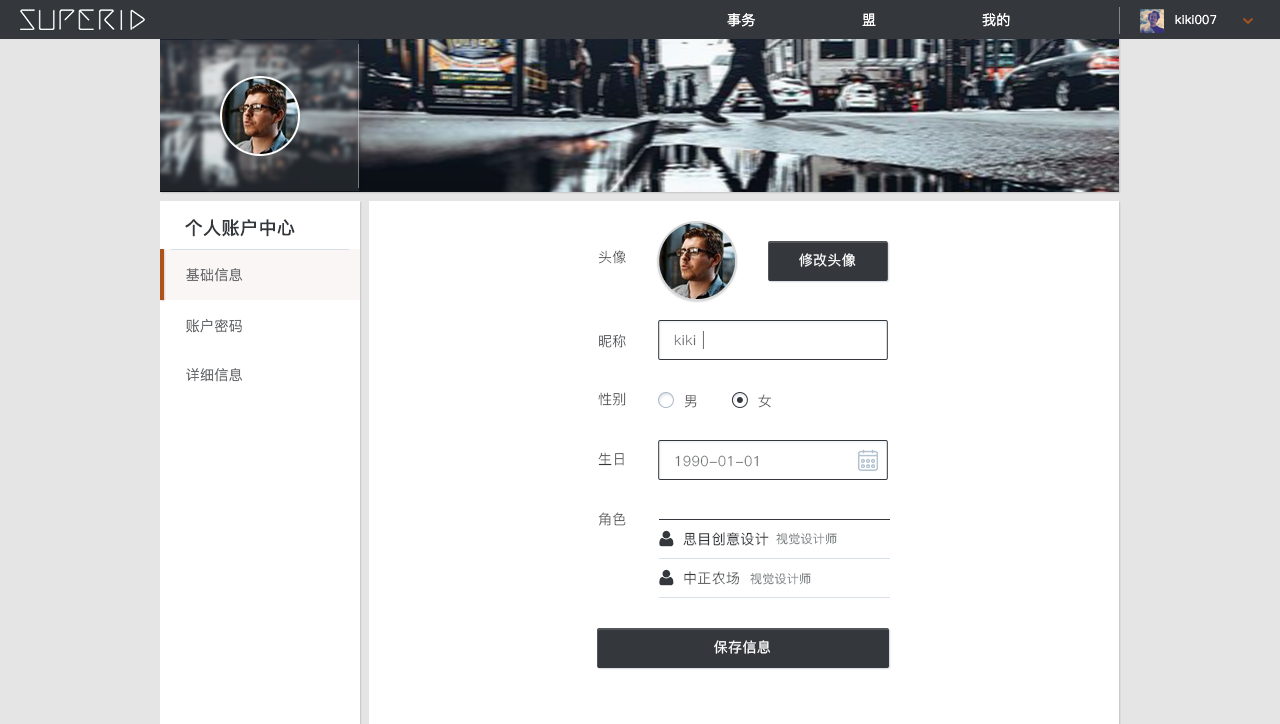
<style>
.page{position:relative;width:1280px;height:724px;background:#ffffff}
.page>*{position:absolute;margin:0}
.t1{font:14px "PingFang-SC-Regular";letter-spacing:0.025em;color:#ffffff}
.t2{font:12px "PingFang-SC-Regular";letter-spacing:0.025em;color:#ffffff}
.t3{font:18px "PingFang-SC-Bold";letter-spacing:0.025em;color:#34383c}
.t4{font:14px "PingFang-SC-Regular";letter-spacing:0.025em}
.t5{font:14px "PingFang-SC-Medium";letter-spacing:0.025em;color:#ffffff}
.t6{font:14px "PingFang-SC-Regular";letter-spacing:0.025em;color:#6a6c6f}
.t7{font:14px "PingFang-SC-Regular";letter-spacing:0.025em;color:#34383c}
.t8{font:14px "PingFang-SC-Medium";letter-spacing:0.025em;color:#34383c}
.t9{font:12px "PingFang-SC-Regular";letter-spacing:0.025em;color:#74797d}
</style>
<div class="page">
<p class="t1" style="left:727px;top:13px;width:28px;height:14px">事务</p>
<p class="t1" style="left:862px;top:13px;width:14px;height:13px">盟</p>
<p class="t1" style="left:982px;top:13px;width:28px;height:14px">我的</p>
<p class="t2" style="left:1175px;top:14px;width:42px;height:11px">kiki007</p>
<p class="t3" style="left:185px;top:219px;width:110px;height:18px">个人账户中心</p>
<p class="t4" style="left:598px;top:250px;width:28px;height:14px">头像</p>
<p class="t5" style="left:799px;top:253px;width:57px;height:14px">修改头像</p>
<p class="t6" style="left:186px;top:268px;width:57px;height:14px">基础信息</p>
<p class="t6" style="left:186px;top:319px;width:56px;height:14px">账户密码</p>
<p class="t7" style="left:599px;top:334px;width:27px;height:14px">昵称</p>
<p class="t6" style="left:674px;top:334px;width:22px;height:12px">kiki</p>
<p class="t6" style="left:186px;top:368px;width:57px;height:14px">详细信息</p>
<p class="t4" style="left:598px;top:392px;width:28px;height:14px">性别</p>
<p class="t4" style="left:684px;top:395px;width:13px;height:13px">男</p>
<p class="t4" style="left:758px;top:394px;width:14px;height:14px">女</p>
<p class="t7" style="left:598px;top:452px;width:26px;height:14px">生日</p>
<p class="t6" style="left:675px;top:455px;width:83px;height:12px">1990-01-01</p>
<p class="t4" style="left:598px;top:512px;width:28px;height:14px">角色</p>
<p class="t8" style="left:683px;top:532px;width:86px;height:14px">思目创意设计</p>
<p class="t9" style="left:776px;top:533px;width:61px;height:12px">视觉设计师</p>
<p class="t7" style="left:684px;top:571px;width:55px;height:14px">中正农场</p>
<p class="t9" style="left:750px;top:573px;width:61px;height:12px">视觉设计师</p>
<p class="t5" style="left:714px;top:640px;width:56px;height:14px">保存信息</p>
</div>
